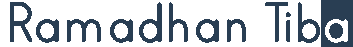
<style>
.page{position:relative;width:353px;height:47px;background:#ffffff}
.page>*{position:absolute;margin:0}
.t1{font:66.4px "PrintBold";color:#293e53}
.t2{font:66.4px "PrintBold";color:#ffffff}
</style>
<div class="page">
<p class="t1" style="left:10px;top:2px;width:338px;height:41px">Ramadhan Tib<span class="t2">a</span></p>
</div>
